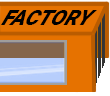
<style>
.page{position:relative;width:110px;height:96px;background:#e67200}
.page>*{position:absolute;margin:0}
.t1{font:22.6px "Roboto-BlackItalic";color:#000000;scale:0.92 1}
</style>
<div class="page">
<p class="t1" style="left:1px;top:10px;width:96px;height:15px">FACTORY</p>
</div>
